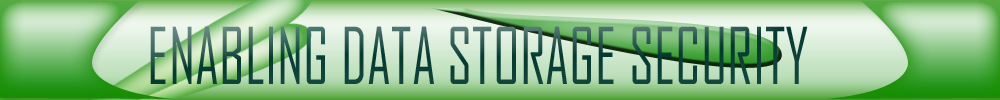
<style>
.page{position:relative;width:1000px;height:100px}
.page>*{position:absolute;margin:0}
.t1{font:75px "AgencyFB-Reg";scale:0.8 1}
</style>
<div class="page">
<p class="t1" style="left:150px;top:26px;width:658px;height:58px">ENABLING DATA STORAGE SECURITY</p>
</div>
